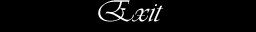
<style>
.page{position:relative;width:256px;height:32px;background:#000000}
.page>*{position:absolute;margin:0}
.t1{font:32px "Vivaldii";color:#ffffff;scale:1.04 1}
</style>
<div class="page">
<p class="t1" style="left:98px;top:0px;width:66px;height:22px">Exit</p>
</div>
